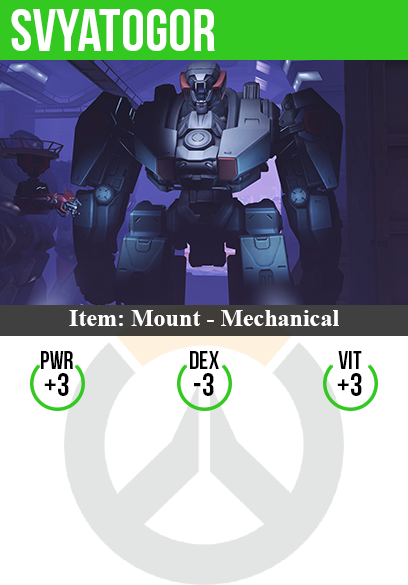
<style>
.page{position:relative;width:408px;height:585px;background:#ffffff}
.page>*{position:absolute;margin:0}
.t1{font:60px "BebasNeue";color:#ffffff}
.t2{font:24px "TimesNewRomanPS-BoldMT";color:#ffffff}
.t3{font:25px "BebasNeue";color:#000000}
.t4{font:32px "BebasNeue";color:#000000}
</style>
<div class="page">
<p class="t1" style="left:11px;top:9px;width:204px;height:42px">Svyatogor</p>
<p class="t2" style="left:69px;top:310px;width:270px;height:16px">Item: Mount - Mechanical</p>
<p class="t3" style="left:41px;top:351px;width:32px;height:18px">pwr</p>
<p class="t3" style="left:190px;top:351px;width:29px;height:18px">dex</p>
<p class="t3" style="left:338px;top:351px;width:24px;height:18px">vit</p>
<p class="t4" style="left:44px;top:373px;width:25px;height:23px">+3</p>
<p class="t4" style="left:194px;top:373px;width:20px;height:23px">-3</p>
<p class="t4" style="left:337px;top:373px;width:25px;height:23px">+3</p>
</div>
